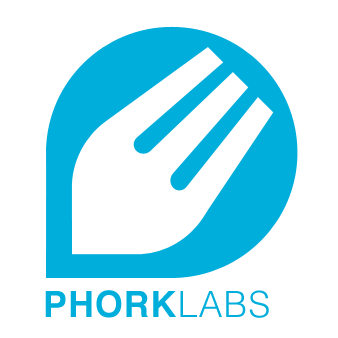
<style>
.page{position:relative;width:338px;height:338px;background:#ffffff}
.page>*{position:absolute;margin:0}
.t1{font:36px "Helvetica-Bold";letter-spacing:0.025em;color:#00aedb}
.t2{font:36px "Helvetica-Light";letter-spacing:0.025em;color:#00aedb}
</style>
<div class="page">
<p class="t1" style="left:45px;top:290px;width:224px;height:28px">PHORK<span class="t2">LABS</span></p>
</div>
